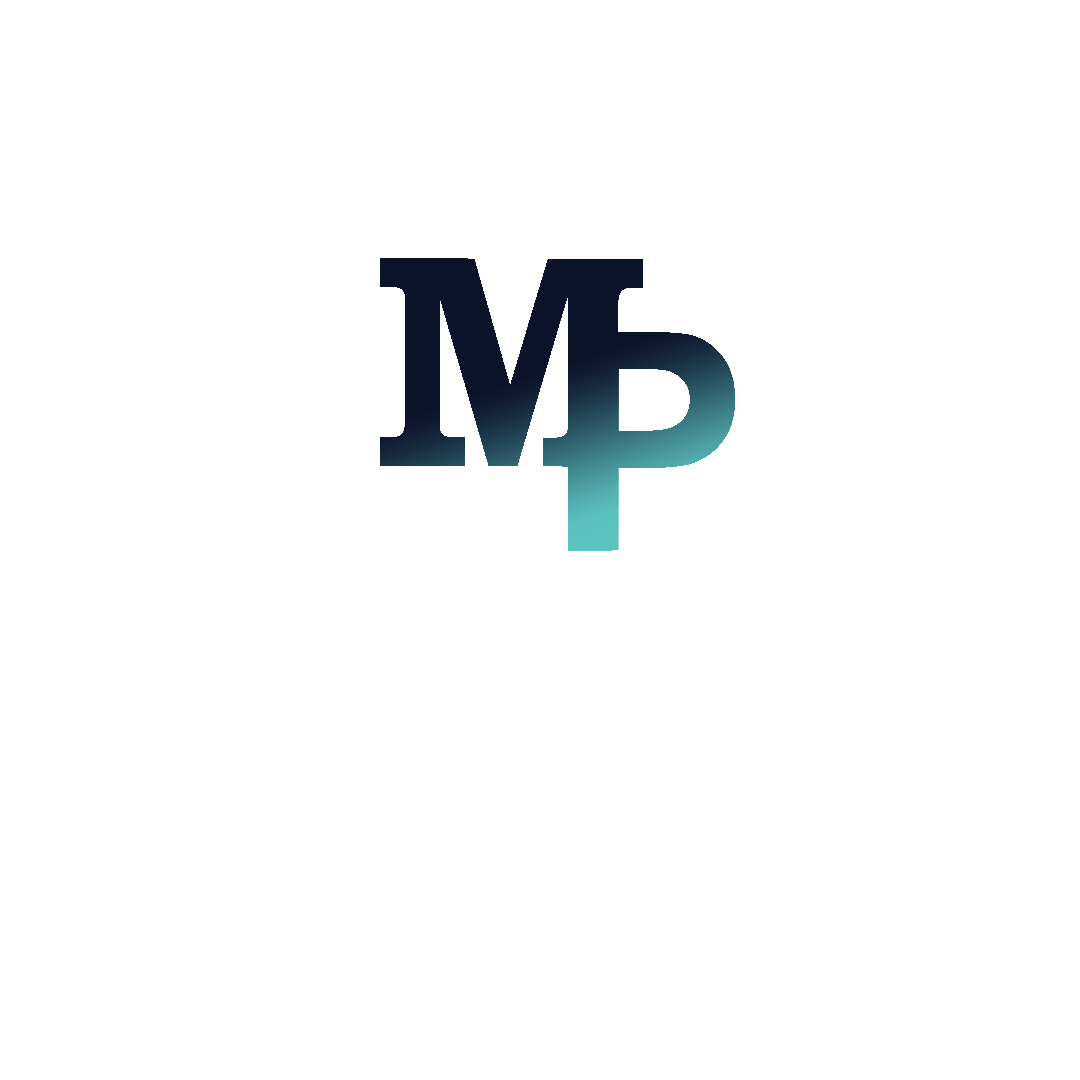
<style>
.page{position:relative;width:1080px;height:1080px;background:#ffffff}
.page>*{position:absolute;margin:0}
.t1{font:304.8px "BookmanOldStyle-Bold";color:#0b132b}
.t2{font:306.4px "Arial-BoldMT"}
</style>
<div class="page">
<p class="t1" style="left:380px;top:258px;width:263px;height:209px">M</p>
<p class="t2" style="left:568px;top:332px;width:167px;height:219px">P</p>
</div>
